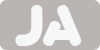
<style>
.page{position:relative;width:100px;height:50px;background:#bab5b2}
.page>*{position:absolute;margin:0}
.t1{font:58px "Zorque-Regular";color:#f6f8f7}
</style>
<div class="page">
<p class="t1" style="left:15px;top:5px;width:66px;height:41px">Ja</p>
</div>
